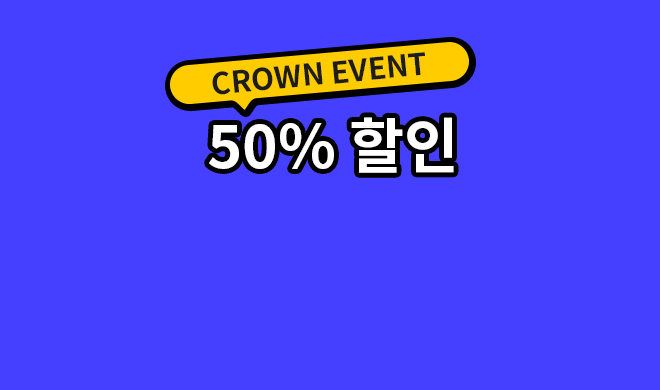
<style>
.page{position:relative;width:660px;height:390px;background:#453fff}
.page>*{position:absolute;margin:0}
.t1{font:30px "NotoSansKR-Bold";color:#1d1d1d}
.t2{font:60px "NotoSansKR-Bold";color:#ffffff}
</style>
<div class="page">
<p class="t1" style="left:212px;top:52px;width:213px;height:43px;rotate:-5deg">CROWN EVENT</p>
<p class="t2" style="left:209px;top:117px;width:245px;height:56px">50% 할인</p>
</div>
